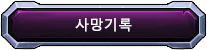
<style>
.page{position:relative;width:207px;height:50px}
.page>*{position:absolute;margin:0}
.t1{font:14px "MalgunGothicRegular";color:#ffffff;font-weight:bold}
</style>
<div class="page">
<p class="t1" style="left:75px;top:18px;width:57px;height:14px">사망기록</p>
</div>
